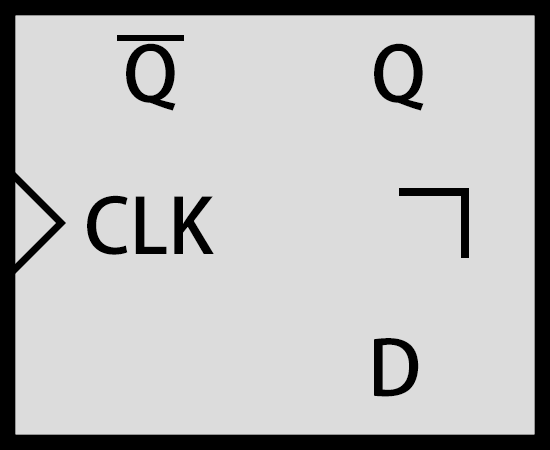
<style>
.page{position:relative;width:550px;height:450px;background:#dcdcdc}
.page>*{position:absolute;margin:0}
.t1{font:75px "AdobeHeitiStd-Regular";color:#000000}
</style>
<div class="page">
<p class="t1" style="left:126px;top:43px;width:50px;height:68px">Q</p>
<p class="t1" style="left:374px;top:43px;width:50px;height:68px">Q</p>
<p class="t1" style="left:87px;top:195px;width:127px;height:60px">CLK</p>
<p class="t1" style="left:374px;top:338px;width:45px;height:59px">D</p>
</div>
